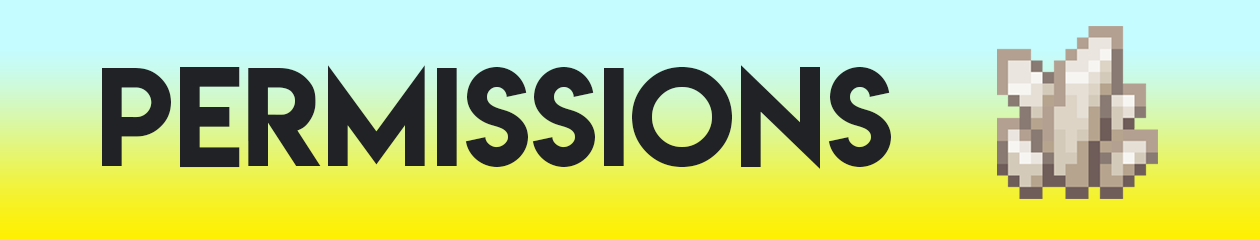
<style>
.page{position:relative;width:1260px;height:240px;background:#c5fcff}
.page>*{position:absolute;margin:0}
.t1{font:125px "LemonMilk";color:#202225}
</style>
<div class="page">
<p class="t1" style="left:102px;top:65px;width:789px;height:104px">permissions</p>
</div>
